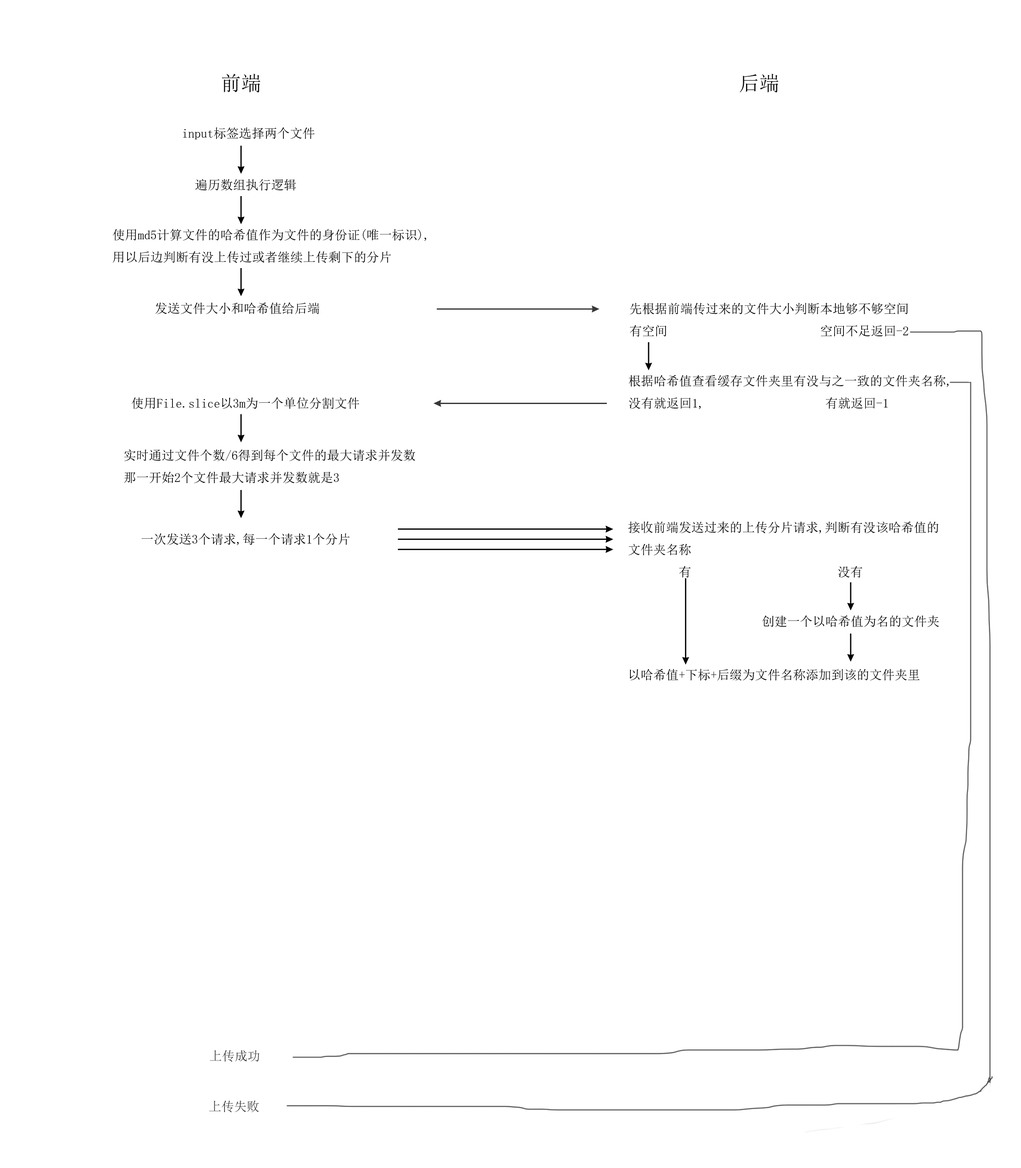
<style>
.page{position:relative;width:1021px;height:1168px;background:#ffffff}
.page>*{position:absolute;margin:0}
.t1{font:20.3px "SimSun";color:#000000}
.t2{font:12.7px "SimSun";color:#000000}
.t3{font:12.7px "SimSun";color:#383838}
</style>
<div class="page">
<p class="t1" style="left:222px;top:74px;width:38px;height:19px">前端</p>
<p class="t1" style="left:740px;top:74px;width:38px;height:19px">后端</p>
<p class="t2" style="left:183px;top:127px;width:132px;height:12px">input标签选择两个文件</p>
<p class="t2" style="left:195px;top:179px;width:101px;height:12px">遍历数组执行逻辑</p>
<p class="t2" style="left:113px;top:229px;width:313px;height:34px">使用md5计算文件的哈希值作为文件的身份证(唯一标识),<br>用以后边判断有没上传过或者继续上传剩下的分片</p>
<p class="t2" style="left:155px;top:302px;width:164px;height:12px">发送文件大小和哈希值给后端</p>
<p class="t2" style="left:629px;top:302px;width:279px;height:35px">先根据前端传过来的文件大小判断本地够不够空间<br>有空间                        空间不足返回-2</p>
<p class="t2" style="left:629px;top:375px;width:319px;height:34px">根据哈希值查看缓存文件夹里有没与之一致的文件夹名称,<br>没有就返回1,                   有就返回-1</p>
<p class="t2" style="left:131px;top:397px;width:228px;height:12px">使用File.slice以3m为一个单位分割文件</p>
<p class="t2" style="left:124px;top:449px;width:291px;height:35px">实时通过文件个数/6得到每个文件的最大请求并发数<br>那一开始2个文件最大请求并发数就是3</p>
<p class="t2" style="left:628px;top:521px;width:310px;height:57px">接收前端发送过来的上传分片请求,判断有没该哈希值的<br>文件夹名称<br>        有                       没有</p>
<p class="t2" style="left:141px;top:533px;width:208px;height:13px">一次发送3个请求,每一个请求1个分片</p>
<p class="t2" style="left:762px;top:615px;width:177px;height:12px">创建一个以哈希值为名的文件夹</p>
<p class="t2" style="left:629px;top:669px;width:291px;height:12px">以哈希值+下标+后缀为文件名称添加到该的文件夹里</p>
<p class="t3" style="left:210px;top:1050px;width:49px;height:12px">上传成功</p>
<p class="t3" style="left:209px;top:1100px;width:50px;height:13px">上传失败</p>
</div>
